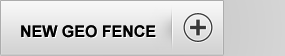
<style>
.page{position:relative;width:285px;height:56px}
.page>*{position:absolute;margin:0}
.t1{font:16px "Arial-BoldMT";color:#000000}
.t2{font:16px "Arial-BoldMT"}
</style>
<div class="page">
<p class="t1" style="left:21px;top:25px;width:135px;height:13px">NEW GEO FENCE</p>
<p class="t1" style="left:21px;top:25px;width:135px;height:13px">NEW GEO FENCE</p>
<p class="t2" style="left:22px;top:26px;width:135px;height:13px">NEW GEO FENCE</p>
</div>
